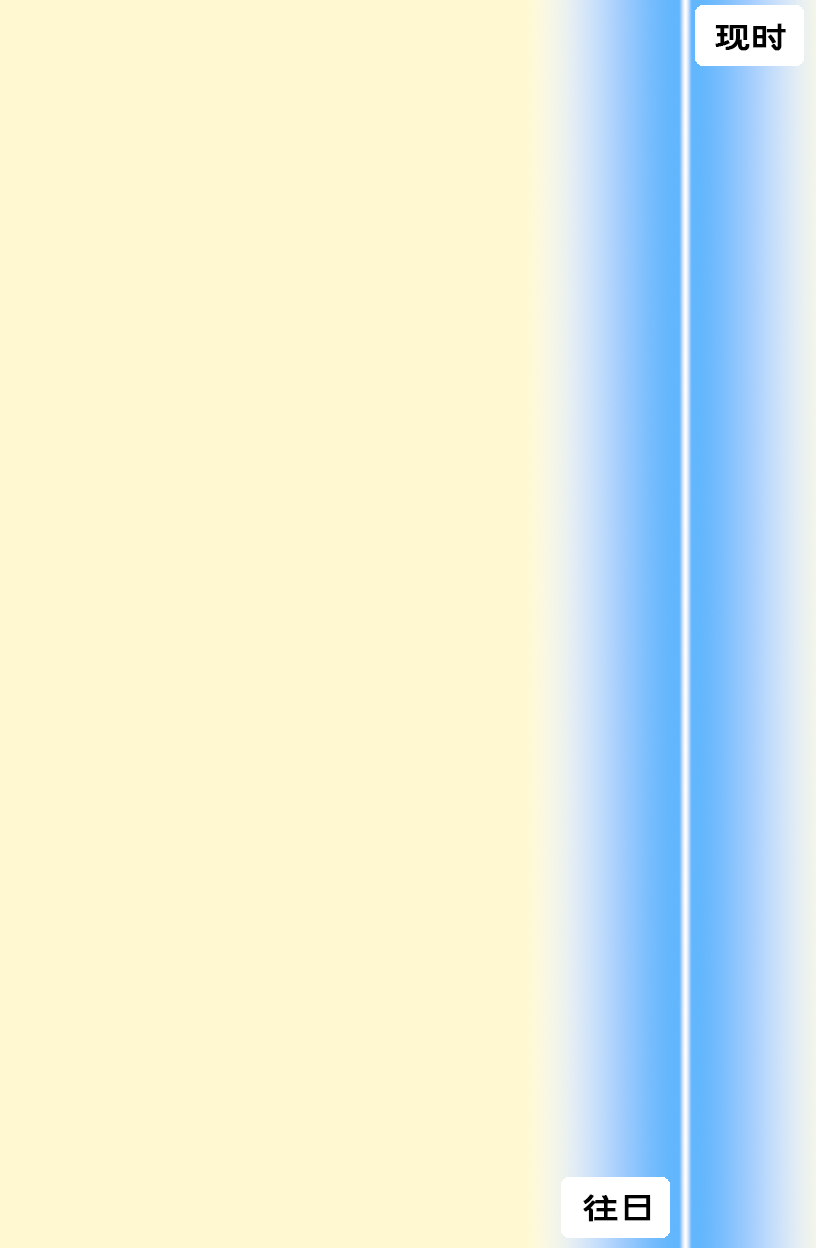
<style>
.page{position:relative;width:816px;height:1248px;background:#fff8d1}
.page>*{position:absolute;margin:0}
.t1{font:36px "LeeeafHei-Regular";color:#010101;font-weight:bold}
.t2{font:36px "LeeeafHei-Regular";color:#000000;font-weight:bold}
</style>
<div class="page">
<p class="t1" style="left:715px;top:23px;width:71px;height:28px">现时</p>
<p class="t2" style="left:583px;top:1194px;width:68px;height:28px">往日</p>
</div>
